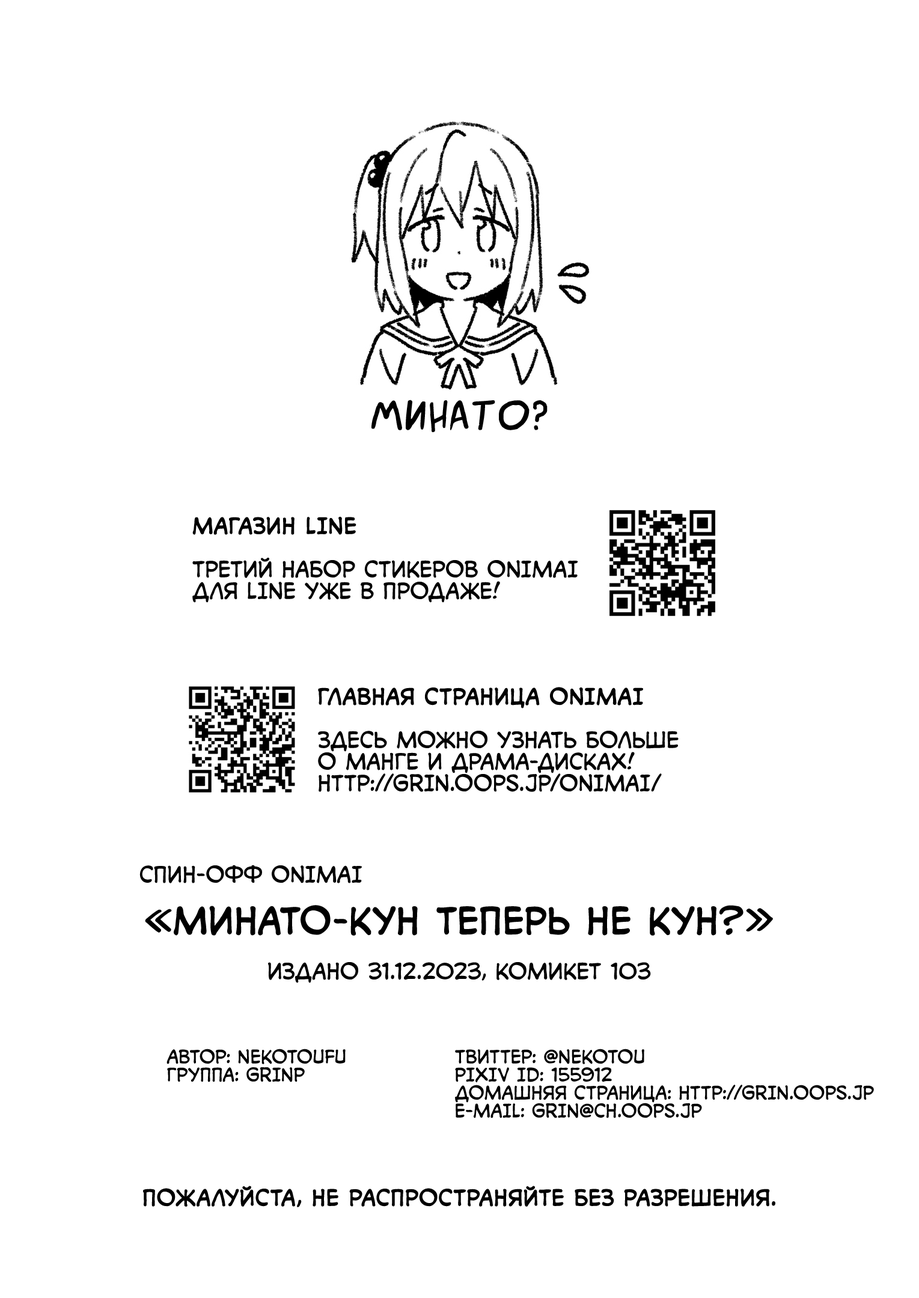
<style>
.page{position:relative;width:919px;height:1298px;background:#ffffff}
.page>*{position:absolute;margin:0}
.t1{font:43.3px "SuperWebcomicBros.Rusbyyakustick";color:#000000}
.t2{font:21.6px "v_CCMonologous";color:#000000;text-transform:uppercase}
.t3{font:21.6px "v_CCMonologous";color:#000000;text-transform:uppercase;font-weight:bold}
.t4{font:36.1px "v_CCMonologous";color:#000000;text-transform:uppercase;font-weight:bold}
.t5{font:18px "v_CCMonologous";color:#000000;text-transform:uppercase}
</style>
<div class="page">
<p class="t1" style="left:371px;top:400px;width:176px;height:33px">Минато?</p>
<p class="t2" style="left:192px;top:517px;width:386px;height:86px"><span class="t3">Магазин LINE<br><br></span>Третий набор стикеров Onimai<br>для LINE уже в продаже!</p>
<p class="t2" style="left:318px;top:687px;width:360px;height:105px"><span class="t3">Главная страница Onimai<br></span><br>Здесь можно узнать больше<br>о манге и драма-дисках!<br>http://grin.oops.jp/onimai/</p>
<p class="t2" style="left:139px;top:865px;width:223px;height:18px">Спин-офф Onimai</p>
<p class="t4" style="left:145px;top:905px;width:628px;height:31px">«Минато-кун теперь не кун?»</p>
<p class="t2" style="left:268px;top:962px;width:383px;height:21px">Издано 31.12.2023, Комикет 103</p>
<p class="t5" style="left:166px;top:1049px;width:180px;height:33px">Автор: Nekotoufu<br>Группа: GRINP</p>
<p class="t5" style="left:455px;top:1049px;width:419px;height:69px">Твиттер: @nekotou<br>Pixiv ID: 155912<br>Домашняя страница: http://grin.oops.jp<br>E-mail: grin@ch.oops.jp</p>
<p class="t3" style="left:143px;top:1186px;width:632px;height:21px">Пожалуйста, не распространяйте без разрешения.</p>
</div>
